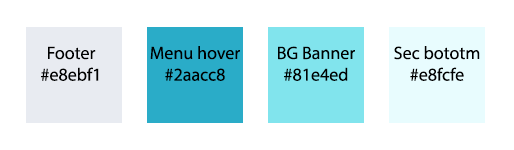
<style>
.page{position:relative;width:514px;height:150px;background:#ffffff}
.page>*{position:absolute;margin:0}
.t1{font:18px "MyriadPro-Regular";color:#000000}
</style>
<div class="page">
<p class="t1" style="left:41px;top:46px;width:58px;height:35px;text-align:center">Footer<br>#e8ebf1</p>
<p class="t1" style="left:150px;top:46px;width:90px;height:35px;text-align:center">Menu hover<br>#2aacc8</p>
<p class="t1" style="left:278px;top:46px;width:77px;height:35px;text-align:center">BG Banner<br>#81e4ed</p>
<p class="t1" style="left:394px;top:46px;width:86px;height:35px;text-align:center">Sec bototm<br>#e8fcfe</p>
</div>
